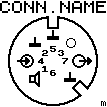
<style>
.page{position:relative;width:107px;height:107px;background:#ffffff}
.page>*{position:absolute;margin:0}
.t1{font:16px "ZX 6x8";color:#000000}
</style>
<div class="page">
<p class="t1" style="left:0px;top:1px;width:106px;height:12px">CONN.NAME</p>
</div>
